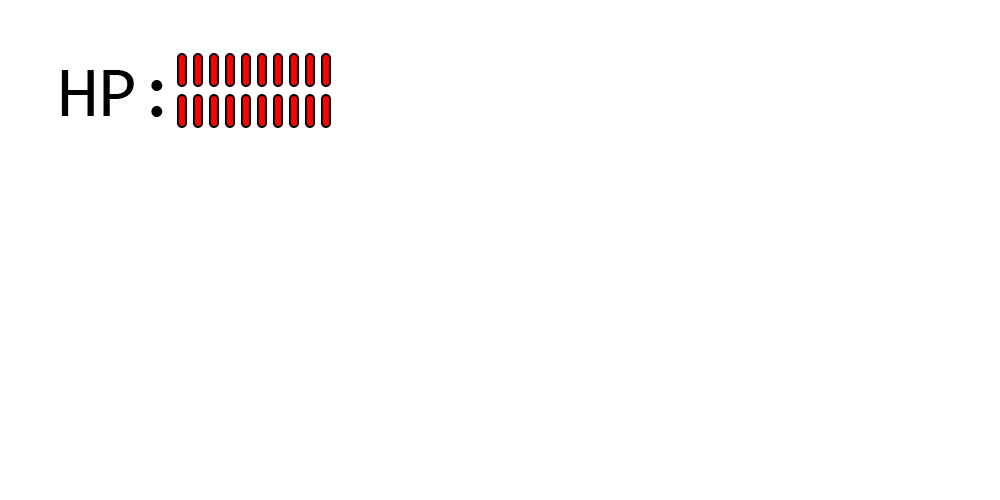
<style>
.page{position:relative;width:1000px;height:500px;background:#ffffff}
.page>*{position:absolute;margin:0}
.t1{font:72px "Consolas";color:#000000}
</style>
<div class="page">
<p class="t1" style="left:61px;top:70px;width:102px;height:47px">HP:</p>
</div>
